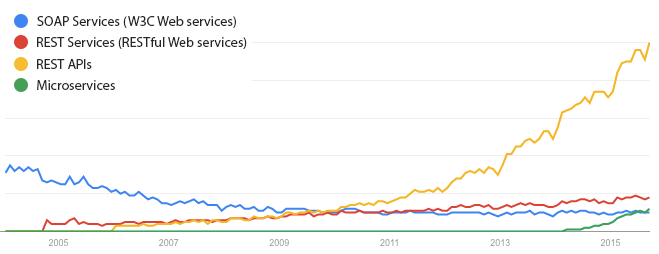
<style>
.page{position:relative;width:659px;height:254px;background:#ffffff}
.page>*{position:absolute;margin:0}
.t1{font:14px "MyriadPro-Regular";color:#262626}
</style>
<div class="page">
<p class="t1" style="left:37px;top:16px;width:199px;height:12px">SOAP Services (W3C Web services)</p>
<p class="t1" style="left:37px;top:37px;width:210px;height:12px">REST Services (RESTful Web services)</p>
<p class="t1" style="left:37px;top:59px;width:55px;height:10px">REST APIs</p>
<p class="t1" style="left:37px;top:80px;width:78px;height:10px">Microservices</p>
</div>
